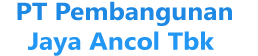
<style>
.page{position:relative;width:258px;height:56px;background:#ffffff}
.page>*{position:absolute;margin:0}
.t1{font:24.8px "SegoeUI-Bold";color:#1e88e5;scale:1.07 1}
.t2{font:24.8px "SegoeUI-Bold";color:#2196f3;scale:1.07 1}
</style>
<div class="page">
<p class="t1" style="left:17px;top:1px;width:215px;height:55px;text-align:center">PT Pembangunan<br><span class="t2">Jaya Ancol Tbk</span></p>
</div>
